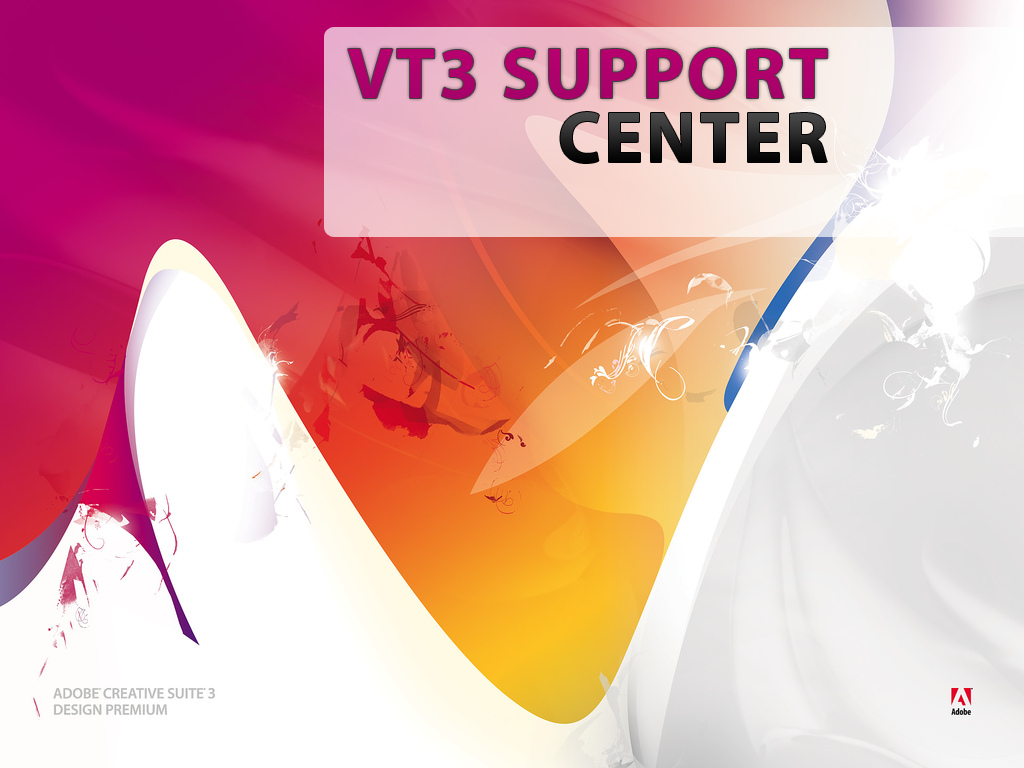
<style>
.page{position:relative;width:1024px;height:768px}
.page>*{position:absolute;margin:0}
.t1{font:72px "MyriadPro-Bold";letter-spacing:0.05em;color:#b0006c}
.t2{font:72px "MyriadPro-Bold";letter-spacing:0.05em}
</style>
<div class="page">
<p class="t1" style="left:348px;top:48px;width:480px;height:51px">VT3 SUPPORT</p>
<p class="t2" style="left:560px;top:112px;width:267px;height:51px">CENTER</p>
</div>
